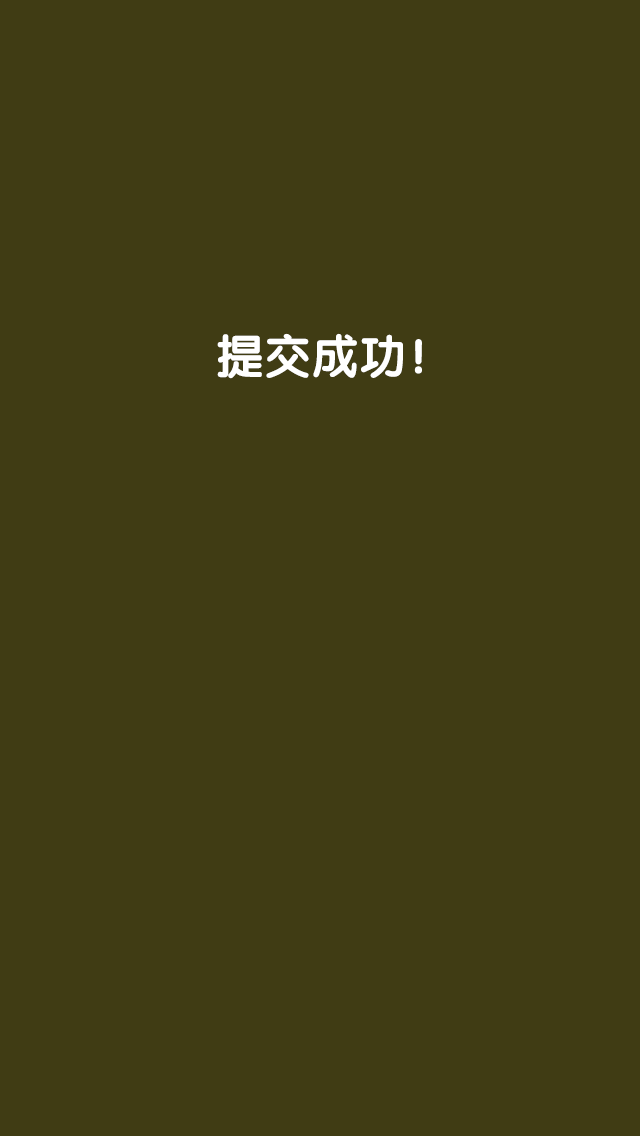
<style>
.page{position:relative;width:640px;height:1136px;background:#403c14}
.page>*{position:absolute;margin:0}
.t1{font:47.2px "FZY4JW--GB1-0";color:#ffffff}
</style>
<div class="page">
<p class="t1" style="left:217px;top:333px;width:205px;height:46px">提交成功！</p>
</div>
